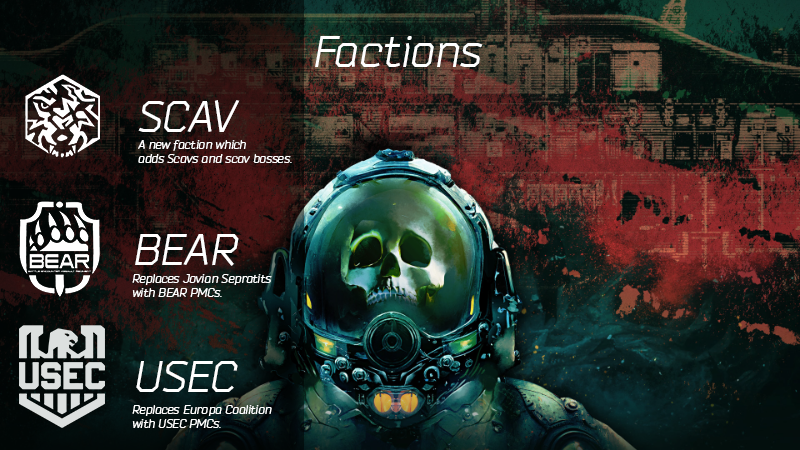
<style>
.page{position:relative;width:800px;height:450px}
.page>*{position:absolute;margin:0}
.t1{font:44.6px "Bender-Italic";color:#ffffff}
.t2{font:12px "Bender-Italic";color:#ffffff}
</style>
<div class="page">
<p class="t1" style="left:315px;top:36px;width:168px;height:31px">Factions</p>
<p class="t1" style="left:138px;top:100px;width:102px;height:32px">SCAV</p>
<p class="t2" style="left:138px;top:140px;width:154px;height:23px">A new faction which <br>adds Scavs and scav bosses.</p>
<p class="t1" style="left:135px;top:234px;width:104px;height:32px">BEAR</p>
<p class="t2" style="left:132px;top:274px;width:140px;height:23px">Replaces Jovian Sepratits<br>with BEAR PMCs.</p>
<p class="t1" style="left:136px;top:361px;width:102px;height:31px">USEC</p>
<p class="t2" style="left:132px;top:405px;width:140px;height:23px">Replaces Europa Coalition<br>with USEC PMCs.</p>
</div>
